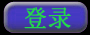
<style>
.page{position:relative;width:90px;height:35px}
.page>*{position:absolute;margin:0}
.t1{font:24px "System";color:#23d849}
</style>
<div class="page">
<p class="t1" style="left:24px;top:7px;width:47px;height:22px">登录</p>
</div>
